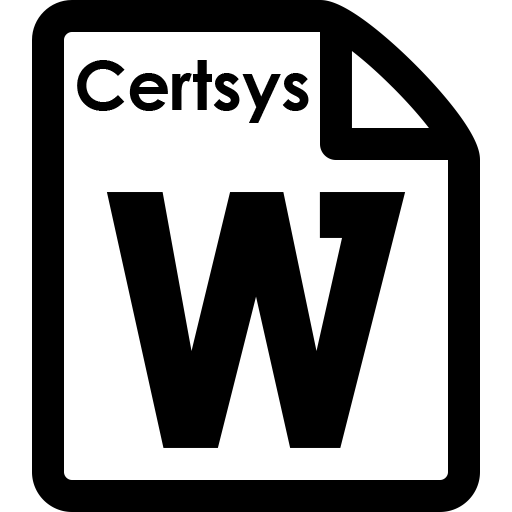
<style>
.page{position:relative;width:512px;height:512px;background:#ffffff}
.page>*{position:absolute;margin:0}
.t1{font:67.7px "CenturyGothic-Bold";color:#000000}
</style>
<div class="page">
<p class="t1" style="left:77px;top:60px;width:232px;height:63px">Certsys</p>
</div>
